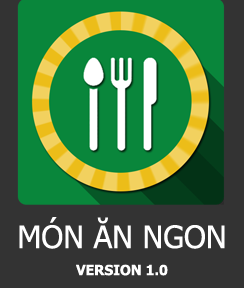
<style>
.page{position:relative;width:244px;height:288px;background:#333333}
.page>*{position:absolute;margin:0}
.t1{font:31px "Tahoma";color:#ffffff}
.t2{font:14px "Tahoma-Bold";color:#ffffff}
</style>
<div class="page">
<p class="t1" style="left:19px;top:217px;width:206px;height:32px">MÓN ĂN NGON</p>
<p class="t2" style="left:76px;top:264px;width:92px;height:12px">VERSION 1.0</p>
</div>
